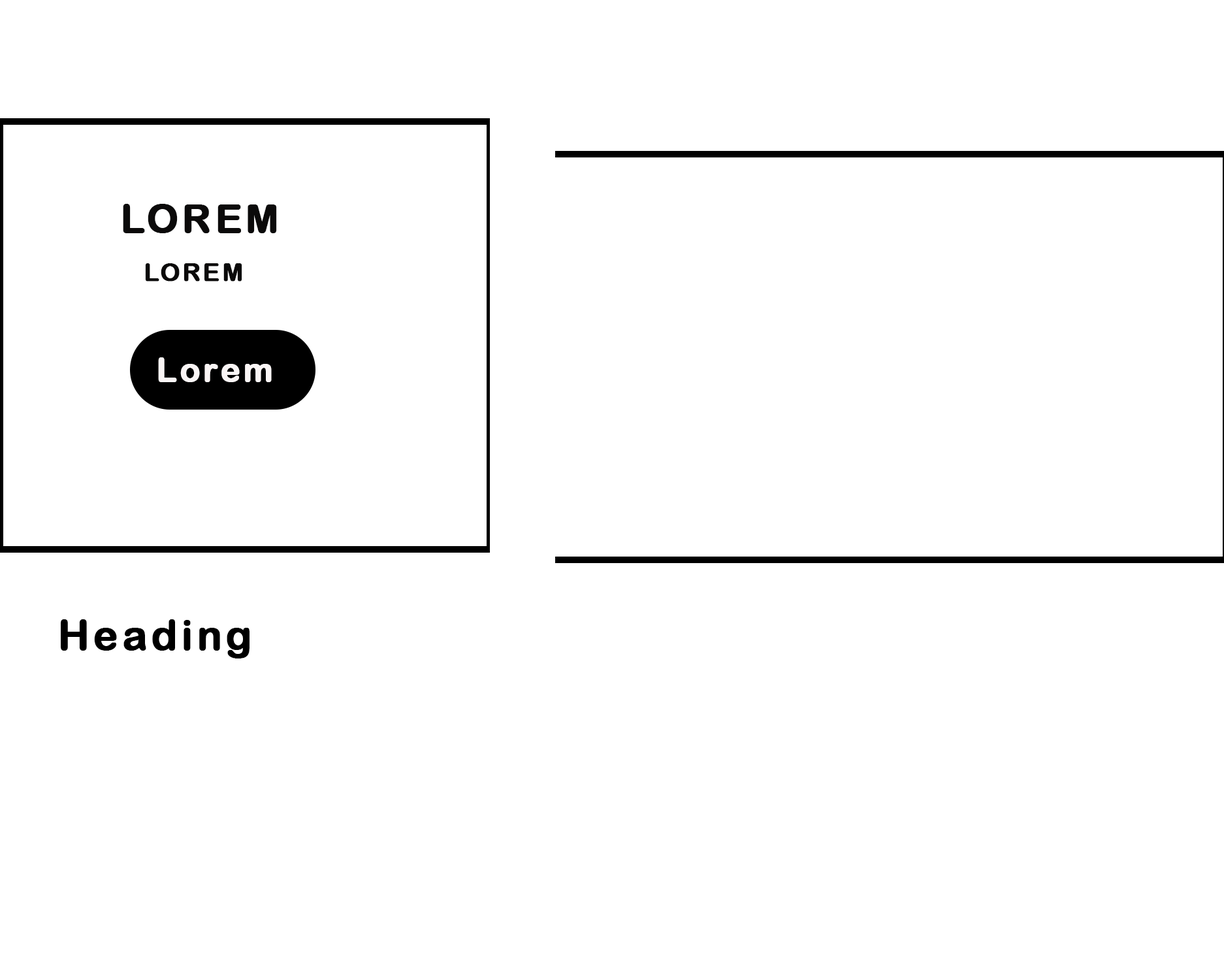
<style>
.page{position:relative;width:1224px;height:974px;background:#ffffff}
.page>*{position:absolute;margin:0}
.t1{font:39.8px "ArialRoundedMTBold";letter-spacing:0.075em;color:#0b0a0a;font-weight:bold}
.t2{font:24.9px "ArialRoundedMTBold";letter-spacing:0.075em;color:#0b0a0a;font-weight:bold}
.t3{font:33.2px "ArialRoundedMTBold";letter-spacing:0.075em;color:#faf5f5;font-weight:bold}
.t4{font:41.5px "ArialRoundedMTBold";letter-spacing:0.075em;color:#000000;font-weight:bold}
</style>
<div class="page">
<p class="t1" style="left:123px;top:204px;width:154px;height:78px">LOREM<br> <span class="t2">LOREM</span></p>
<p class="t3" style="left:158px;top:357px;width:114px;height:25px">Lorem</p>
<p class="t4" style="left:61px;top:619px;width:189px;height:39px">Heading</p>
</div>
